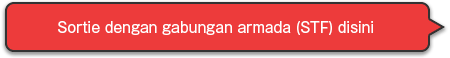
<style>
.page{position:relative;width:450px;height:58px;background:#ed3b3b}
.page>*{position:absolute;margin:0}
.t1{font:14px "GothicMB101Pro-Regular";color:#ffffff}
</style>
<div class="page">
<p class="t1" style="left:58px;top:21px;width:315px;height:14px">Sortie dengan gabungan armada (STF) disini</p>
</div>
